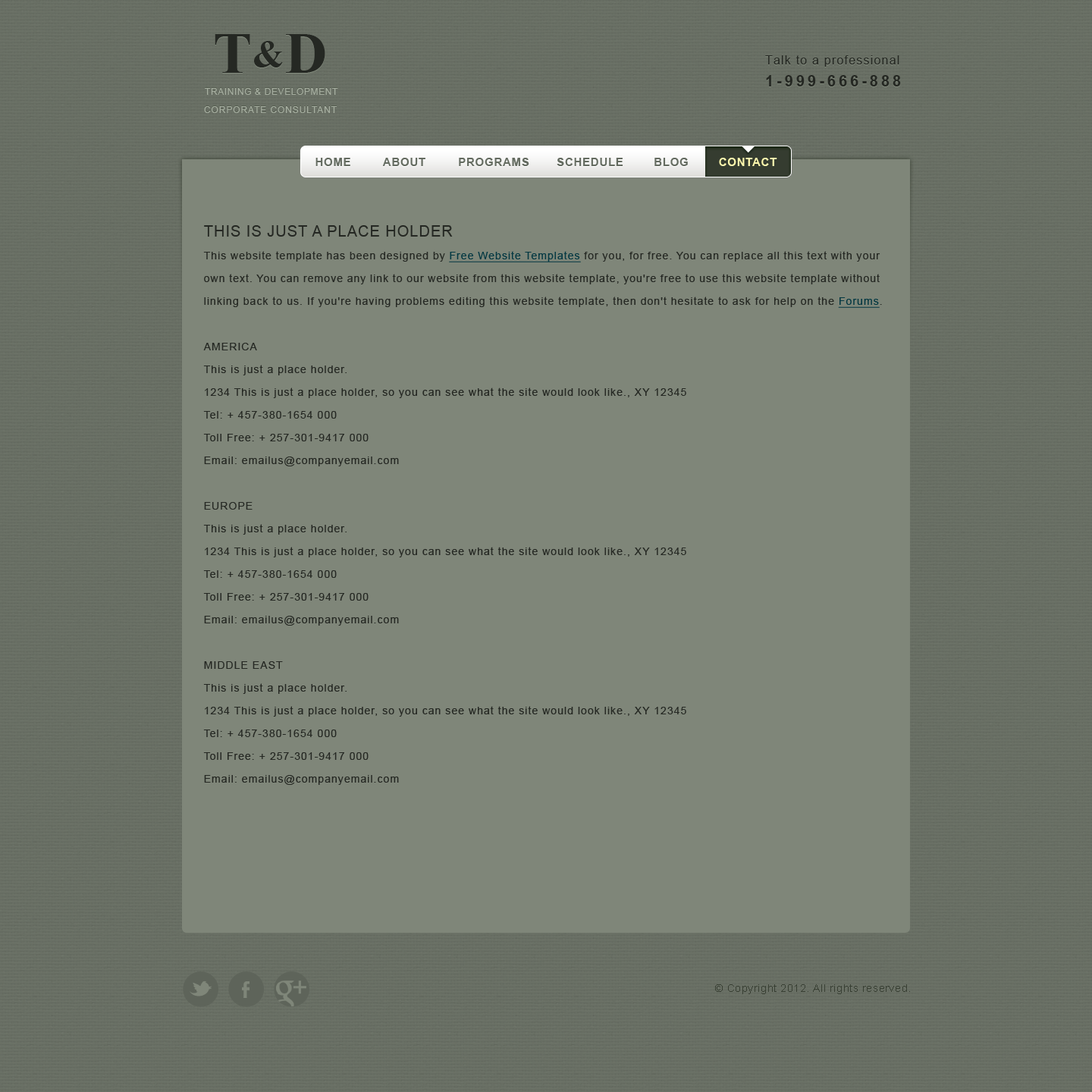
<style>
.page{position:relative;width:1092px;height:1092px;background:#7f8679}
.page>*{position:absolute;margin:0}
.t1{font:58.7px "TimesNewRomanPS-BoldMT";letter-spacing:0.05em;color:#171c13;text-transform:uppercase}
.t2{font:38.1px "TimesNewRomanPS-BoldMT";letter-spacing:0.05em;color:#171c13;text-transform:uppercase}
.t3{font:12.1px "ArialMT";letter-spacing:0.075em;color:#252823}
.t4{font:15.2px "Arial-BoldMT";letter-spacing:0.2em;color:#252823}
.t5{font:9.1px "ArialMT";letter-spacing:0.05em;color:#a7afa1;text-transform:uppercase}
.t6{font:9.1px "ArialMT";letter-spacing:0.075em;color:#a7afa1;text-transform:uppercase}
.t7{font:11.4px "Arial-BoldMT";letter-spacing:0.05em;color:#646b60;text-transform:uppercase}
.t8{font:11.4px "Arial-BoldMT";letter-spacing:0.05em;color:#fff9ae;text-transform:uppercase}
.t9{font:10.6px/22.7px "ArialMT";letter-spacing:0.075em;color:#252823}
.t10{font:15.2px/22.7px "ArialMT";letter-spacing:0.05em;color:#252823;text-transform:uppercase}
.t11{font:10.6px/22.7px "ArialMT";letter-spacing:0.075em;color:#033842;text-decoration:underline}
.t12{font:10.6px "ArialMT";letter-spacing:0.05em;color:#383f33}
</style>
<div class="page">
<p class="t1" style="left:215px;top:34px;width:35px;height:39px">t</p>
<p class="t2" style="left:254px;top:41px;width:29px;height:26px">&amp;</p>
<p class="t1" style="left:286px;top:34px;width:39px;height:39px">d</p>
<p class="t3" style="left:765px;top:55px;width:134px;height:12px">Talk to a professional</p>
<p class="t4" style="left:766px;top:75px;width:135px;height:11px">1-999-666-888</p>
<p class="t5" style="left:205px;top:88px;width:133px;height:7px">training &amp; development</p>
<p class="t6" style="left:204px;top:106px;width:133px;height:7px">corporate consultant</p>
<p class="t7" style="left:315px;top:158px;width:35px;height:8px">Home</p>
<p class="t7" style="left:382px;top:158px;width:43px;height:8px">About</p>
<p class="t7" style="left:459px;top:158px;width:70px;height:8px">PRograms</p>
<p class="t7" style="left:557px;top:158px;width:66px;height:8px">Schedule</p>
<p class="t7" style="left:654px;top:158px;width:34px;height:8px">Blog</p>
<p class="t8" style="left:719px;top:158px;width:58px;height:8px">Contact</p>
<p class="t9" style="left:203px;top:225px;width:679px;height:560px"><span class="t10">This is just a place holder<br></span>This website template has been designed by <span class="t11">Free Website Templates</span> for you, for free. You can replace all this text with your own text. You can remove any link to our website from this website template, you're free to use this website template without linking back to us. If you're having problems editing this website template, then don't hesitate to ask for help on the <span class="t11">Forums</span>.<br><br>AMERICA<br>This is just a place holder.<br>1234 This is just a place holder, so you can see what the site would look like., XY 12345<br>Tel: + 457-380-1654 000<br>Toll Free: + 257-301-9417 000<br>Email: emailus@companyemail.com<br><br>EUROPE<br>This is just a place holder.<br>1234 This is just a place holder, so you can see what the site would look like., XY 12345<br>Tel: + 457-380-1654 000<br>Toll Free: + 257-301-9417 000<br>Email: emailus@companyemail.com<br><br>MIDDLE EAST<br>This is just a place holder.<br>1234 This is just a place holder, so you can see what the site would look like., XY 12345<br>Tel: + 457-380-1654 000<br>Toll Free: + 257-301-9417 000<br>Email: emailus@companyemail.com</p>
<p class="t12" style="left:715px;top:984px;width:195px;height:10px">© Copyright 2012. All rights reserved.</p>
</div>
